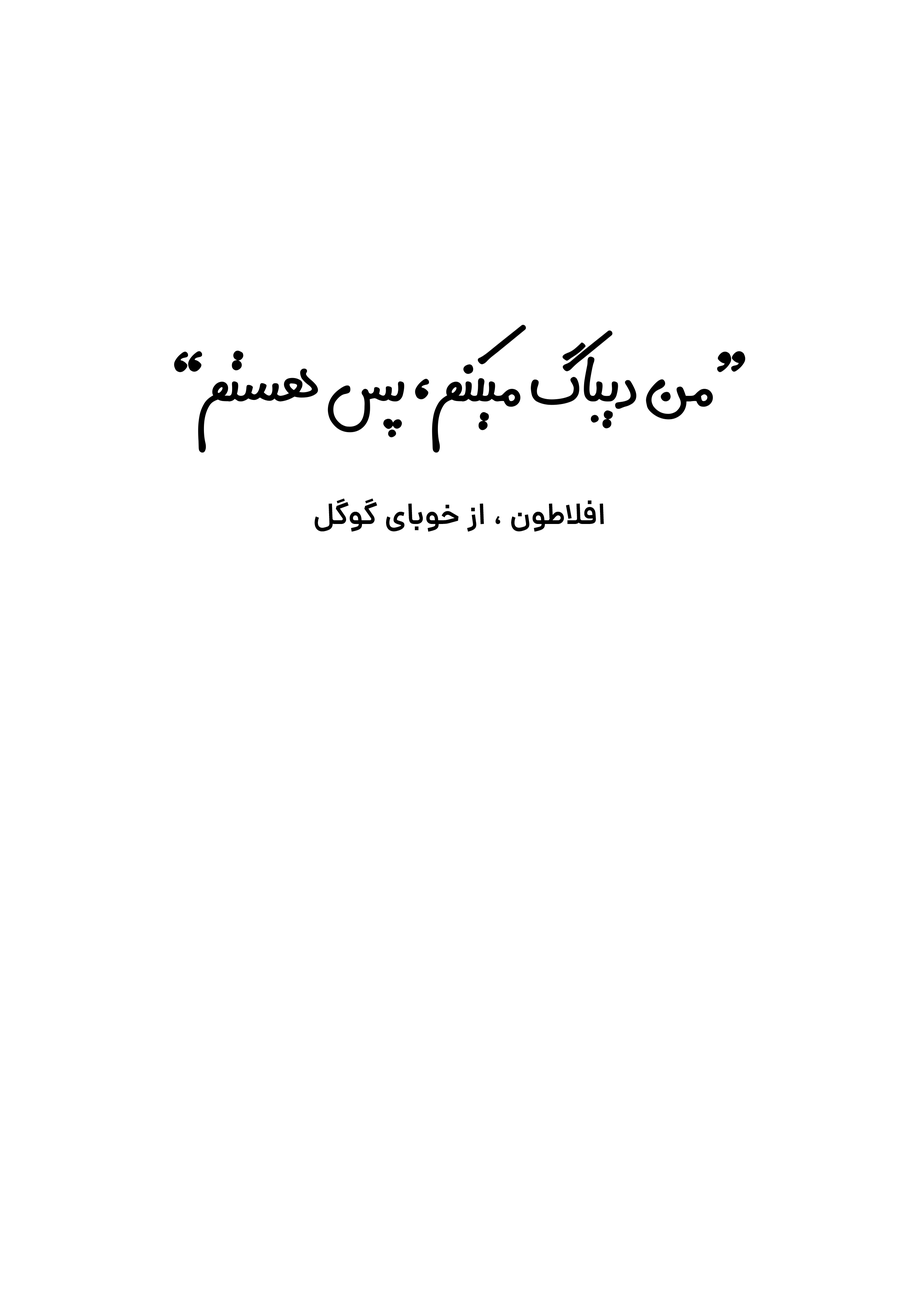
<style>
.page{position:relative;width:918px;height:1299px;background:#ffffff}
.page>*{position:absolute;margin:0}
.t1{font:89.5px "Digi-Gran-Payeh-Bold";color:#000000}
.t2{font:29.9px "Dana-DemiBold";color:#000000}
</style>
<div class="page">
<p class="t1" style="left:174px;top:325px;width:572px;height:128px">“من دیباگ میکنم ، پس هستم”</p>
<p class="t2" style="left:315px;top:498px;width:289px;height:34px">افلاطون ، از خوبای گوگل</p>
</div>
